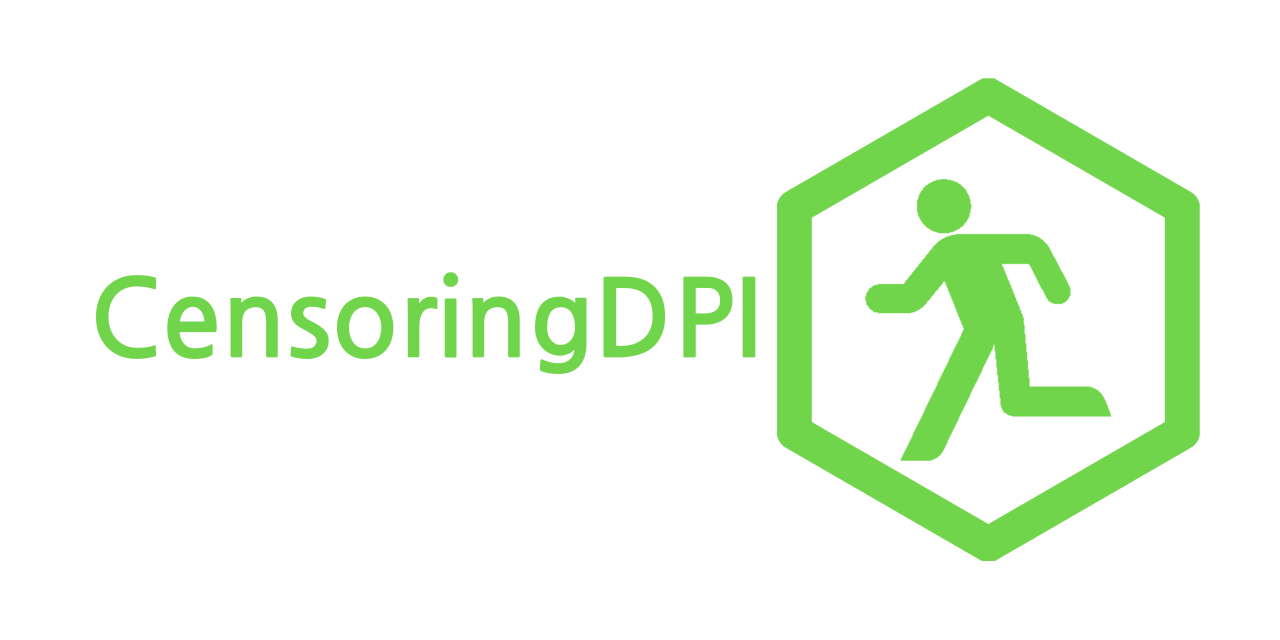
<style>
.page{position:relative;width:1280px;height:640px;background:#ffffff}
.page>*{position:absolute;margin:0}
.t1{font:107.4px "NanumGothicBold";color:#71d54c}
</style>
<div class="page">
<p class="t1" style="left:96px;top:272px;width:660px;height:102px">CensoringDPI</p>
</div>
